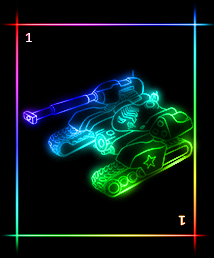
<style>
.page{position:relative;width:214px;height:258px;background:#000000}
.page>*{position:absolute;margin:0}
.t1{font:14px "Consolas";color:#ffffff}
</style>
<div class="page">
<p class="t1" style="left:25px;top:33px;width:7px;height:9px">1</p>
<p class="t1" style="left:178px;top:215px;width:8px;height:11px;rotate:180deg">1</p>
</div>
